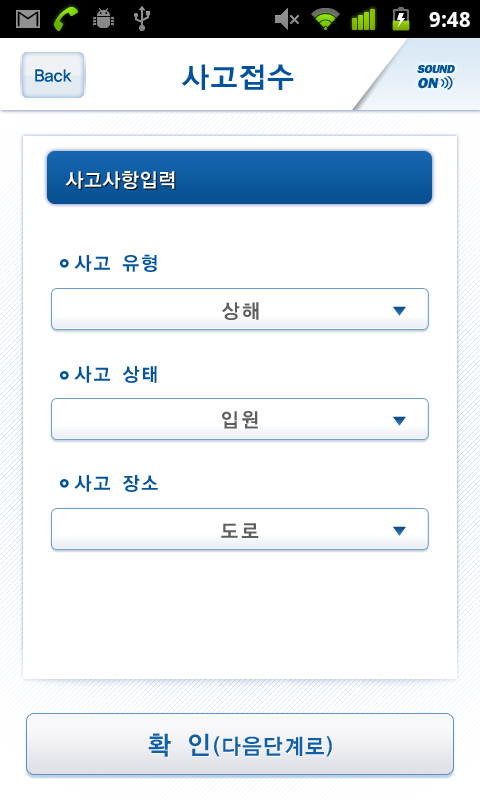
<style>
.page{position:relative;width:480px;height:800px;background:#ffffff}
.page>*{position:absolute;margin:0}
.t1{font:29px "YDIYGO140-KSCpc-EUC-H";letter-spacing:-0.025em;color:#00529b}
.t2{font:12px/15px "FranklinGothic-Heavy";letter-spacing:-0.05em;color:#00529b;text-transform:uppercase;font-style:italic}
.t3{font:13px/15px "FranklinGothic-Heavy";color:#00529b;text-transform:uppercase;font-style:italic}
.t4{font:15px/15px "FranklinGothic-Heavy";color:#00529b;text-transform:uppercase;font-style:italic}
.t5{font:18px "YDIYGO140-KSCpc-EUC-H";letter-spacing:-0.075em;color:#00529b;scale:0.95 1}
.t6{font:20px "YDIYGO140-KSCpc-EUC-H";letter-spacing:-0.025em;color:#ffffff;scale:0.95 1}
.t7{font:19px "YDIYGO140-KSCpc-EUC-H";letter-spacing:0.05em;color:#00529b;scale:0.95 1}
.t8{font:20px "YDIYGO140-KSCpc-EUC-H";letter-spacing:0.075em;color:#5c5c5c;scale:0.95 1}
.t9{font:22px "YDIYGO140-KSCpc-EUC-H";color:#115fa5;scale:0.95 1}
.t10{font:26px "YDIYGO140-KSCpc-EUC-H";letter-spacing:0.05em;color:#115fa5;scale:0.95 1}
</style>
<div class="page">
<p class="t1" style="left:181px;top:64px;width:113px;height:26px">사고접수</p>
<p class="t2" style="left:417px;top:65px;width:38px;height:24px">sound<br><span class="t3">oFF</span></p>
<p class="t2" style="left:417px;top:65px;width:38px;height:24px">sound<br><span class="t4">on</span></p>
<p class="t5" style="left:35px;top:69px;width:37px;height:13px">Back</p>
<p class="t6" style="left:65px;top:171px;width:110px;height:18px">사고사항입력</p>
<p class="t7" style="left:74px;top:254px;width:83px;height:18px">사고 유형</p>
<p class="t8" style="left:222px;top:302px;width:37px;height:18px">상해</p>
<p class="t7" style="left:74px;top:366px;width:83px;height:17px">사고 상태</p>
<p class="t8" style="left:222px;top:411px;width:36px;height:18px">입원</p>
<p class="t7" style="left:74px;top:475px;width:84px;height:17px">사고 장소</p>
<p class="t8" style="left:221px;top:523px;width:38px;height:15px">도로</p>
<p class="t9" style="left:148px;top:733px;width:184px;height:24px"><span class="t10">확 인</span>(다음단계로)</p>
</div>
